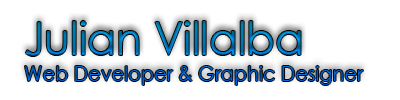
<style>
.page{position:relative;width:400px;height:100px;background:#ffffff}
.page>*{position:absolute;margin:0}
.t1{font:21.2px "CenturyGothic";scale:0.92 1}
.t2{font:46.3px "CenturyGothic";scale:0.92 1}
</style>
<div class="page">
<p class="t1" style="left:25px;top:21px;width:338px;height:64px"><span class="t2">Julian Villalba<br></span>Web Developer &amp; Graphic Designer</p>
</div>
